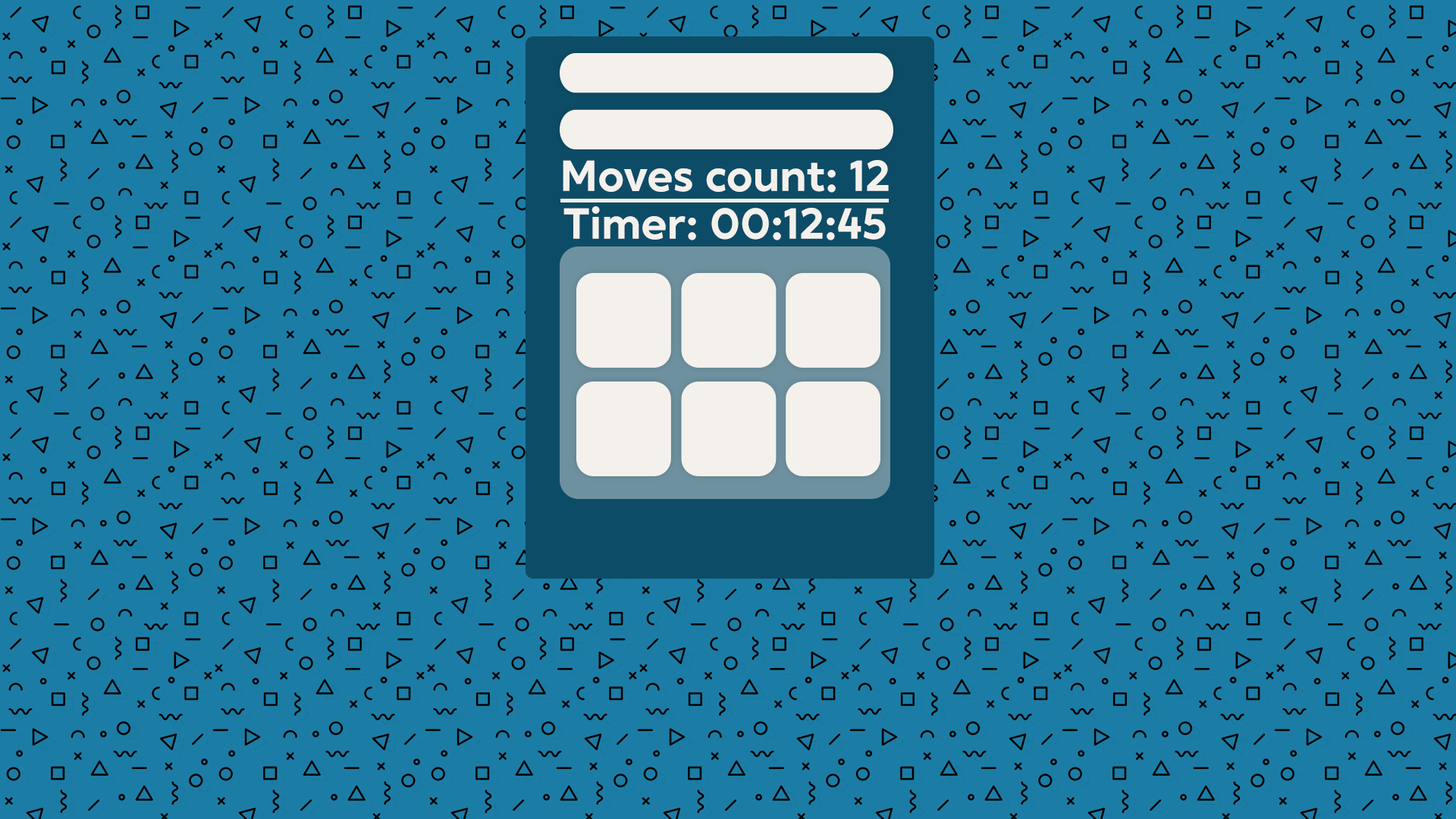
<style>
.page{position:relative;width:1456px;height:819px;background:#1b7da6}
.page>*{position:absolute;margin:0}
.t1{font:43.5px "XXIIGeom-Bold";color:#f4f1ec}
</style>
<div class="page">
<p class="t1" style="left:563px;top:160px;width:326px;height:33px">Moves count: 12</p>
<p class="t1" style="left:563px;top:206px;width:323px;height:34px">Timer: 00:12:45</p>
</div>
